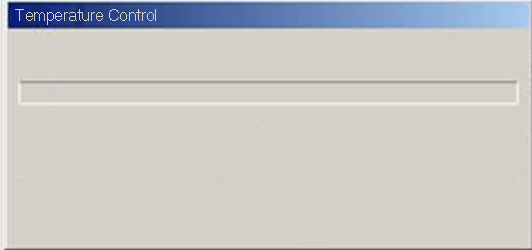
<style>
.page{position:relative;width:532px;height:250px;background:#d4d0c7}
.page>*{position:absolute;margin:0}
.t1{font:15.9px "MicrosoftSansSerif";color:#d4d0c7}
</style>
<div class="page">
<p class="t1" style="left:15px;top:9px;width:141px;height:16px">Temperature Control</p>
</div>
